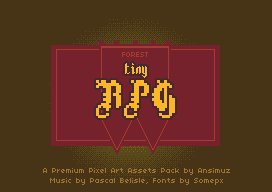
<style>
.page{position:relative;width:272px;height:192px;background:#473315}
.page>*{position:absolute;margin:0}
.t1{font:8.1px "04b03";color:#a63c2e}
.t2{font:8.1px "04b03";color:#a17431}
</style>
<div class="page">
<p class="t1" style="left:122px;top:52px;width:26px;height:5px">FOREST</p>
<p class="t2" style="left:43px;top:168px;width:187px;height:17px;text-align:center">A Premium Pixel Art Assets Pack by Ansimuz<br>Music by Pascal Belisle, Fonts by Somepx</p>
</div>
